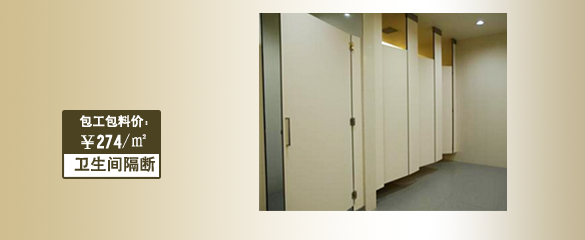
<style>
.page{position:relative;width:585px;height:240px}
.page>*{position:absolute;margin:0}
.t1{font:12.8px "HeitiCSEG";color:#fffefe}
.t2{font:17.1px "HeitiCSEG";color:#ffffff}
.t3{font:17.1px "SimSun";color:#ffffff}
.t4{font:16.4px "HeitiCSEG";color:#4b4221}
</style>
<div class="page">
<p class="t1" style="left:79px;top:115px;width:69px;height:13px">包工包料价：</p>
<p class="t2" style="left:81px;top:133px;width:65px;height:16px">￥274<span class="t3">/㎡</span></p>
<p class="t4" style="left:74px;top:156px;width:81px;height:16px">卫生间隔断</p>
</div>
